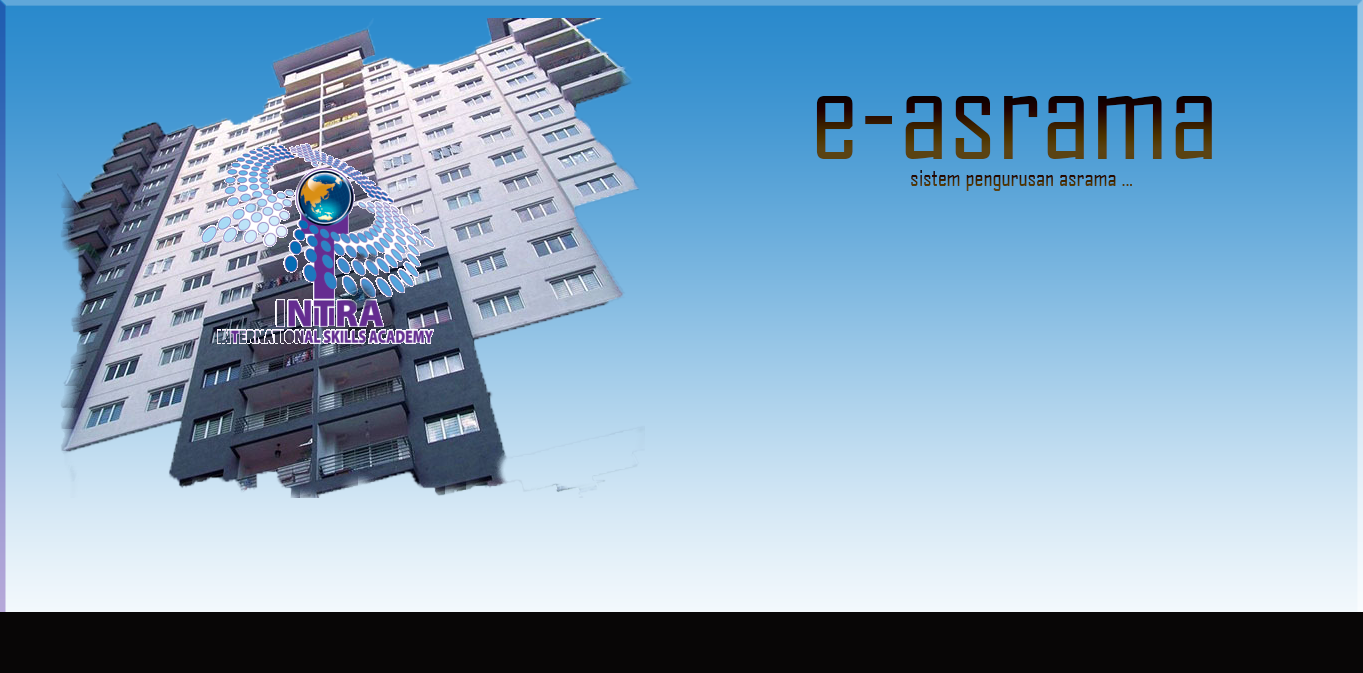
<style>
.page{position:relative;width:1363px;height:673px}
.page>*{position:absolute;margin:0}
.t1{font:133.3px "AgencyFB-Reg"}
.t2{font:24px "AgencyFB-Reg"}
</style>
<div class="page">
<p class="t1" style="left:816px;top:96px;width:396px;height:63px">e-asrama</p>
<p class="t2" style="left:911px;top:170px;width:221px;height:21px">sistem pengurusan asrama ...</p>
</div>
